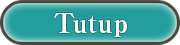
<style>
.page{position:relative;width:180px;height:45px}
.page>*{position:absolute;margin:0}
.t1{font:27px "RyuminPro-ExBold";color:#fff7f3}
</style>
<div class="page">
<p class="t1" style="left:54px;top:13px;width:73px;height:24px">Tutup</p>
</div>
